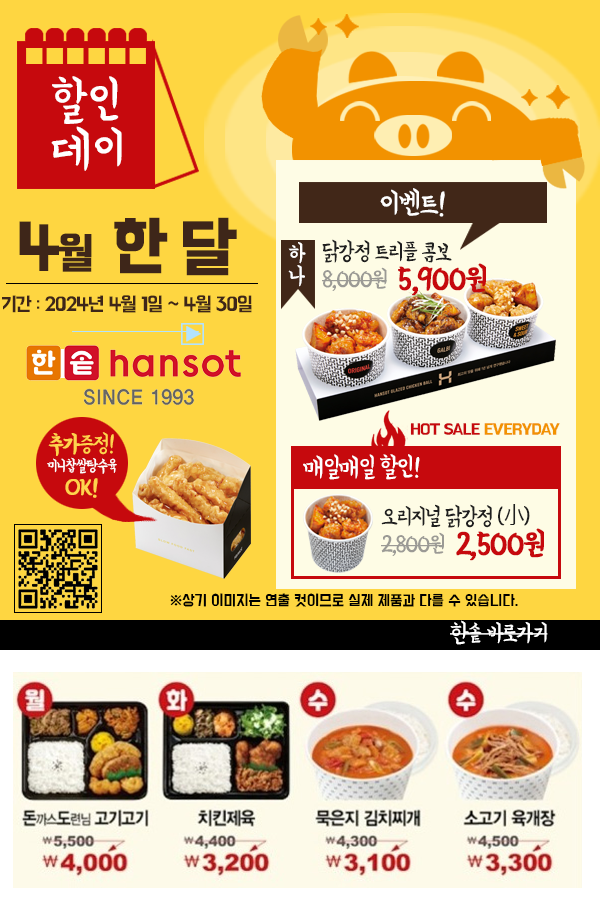
<style>
.page{position:relative;width:600px;height:900px;background:#fed641}
.page>*{position:absolute;margin:0}
.t1{font:49.5px "BMYEONSUNG";color:#ffffff}
.t2{font:49.5px/48.1px "BMYEONSUNG";color:#ffffff}
.t3{font:31.4px "BMYEONSUNG";letter-spacing:-0.06em;color:#ffffff}
.t4{font:20px/44px "BMHANNAPro";letter-spacing:-0.06em;color:#3e2619}
.t5{font:66px "BMHANNAPro";letter-spacing:-0.06em;color:#3e2619;font-weight:bold}
.t6{font:44px "BMHANNAPro";letter-spacing:-0.06em;color:#3e2619;font-weight:bold}
.t7{font:66px "BMHANNAPro";letter-spacing:-0.1em;color:#3e2619;font-weight:bold}
.t8{font:24px/22px "BMYEONSUNG";letter-spacing:-0.06em;color:#ffffff}
.t9{font:24px/22px "BMYEONSUNG";letter-spacing:-0.06em;color:#1f1f1f}
.t10{font:24px/28px "BMYEONSUNG";letter-spacing:-0.06em;color:#9b9a95}
.t11{font:32px/28px "BMYEONSUNG";letter-spacing:-0.06em;color:#c6090d;font-weight:bold}
.t12{font:16px "BMHANNAPro";letter-spacing:-0.06em;color:#c6090d}
.t13{font:16px "BMHANNAPro";letter-spacing:-0.06em;color:#f29200}
.t14{font:16px/20px "BMYEONSUNG";letter-spacing:-0.06em;color:#ffffff}
.t15{font:24px/26px "BMYEONSUNG";letter-spacing:-0.06em;color:#ffd34d;font-weight:bold}
.t16{font:24px/26px "BMYEONSUNG";letter-spacing:-0.06em;color:#ffd34d}
.t17{font:24px/24px "BMYEONSUNG";letter-spacing:-0.06em;color:#ffd34d;font-weight:bold}
.t18{font:26px "BMYEONSUNG";letter-spacing:-0.06em;color:#ffffff}
.t19{font:24px/22px "NanumGothic";letter-spacing:-0.06em;color:#1f1f1f}
.t20{font:13px "BMDoHyeon";color:#000000}
.t21{font:24px "BMYEONSUNG";letter-spacing:-0.06em;color:#ffffff}
</style>
<div class="page">
<p class="t1" style="left:51px;top:76px;width:71px;height:95px">할인<br><span class="t2">데이</span></p>
<p class="t3" style="left:380px;top:188px;width:65px;height:29px">이벤트!</p>
<p class="t4" style="left:2px;top:217px;width:250px;height:96px;text-align:center"><span class="t5">4</span><span class="t6">월 </span><span class="t7">한 달<br></span>기간 : 2024년 4월 1일 ~ 4월 30일</p>
<p class="t8" style="left:288px;top:242px;width:18px;height:45px">하나</p>
<p class="t9" style="left:322px;top:239px;width:164px;height:57px">닭강정 트리플 콤보<br><span class="t10">8,000원  </span><span class="t11">5,900원</span></p>
<p class="t12" style="left:410px;top:423px;width:150px;height:12px">HOT SALE <span class="t13">EVERYDAY</span></p>
<p class="t14" style="left:47px;top:432px;width:70px;height:66px;text-align:center"><span class="t15">추가</span><span class="t16">증정!<br></span>미니찹쌀탕수육<br><span class="t17">OK!</span></p>
<p class="t18" style="left:303px;top:454px;width:117px;height:26px">매일매일 할인!</p>
<p class="t9" style="left:381px;top:504px;width:163px;height:57px">오리지널 닭강정 (<span class="t19">小</span>)<br><span class="t10">2,800원  </span><span class="t11">2,500원</span></p>
<p class="t20" style="left:170px;top:593px;width:348px;height:14px">※상기 이미지는 연출 컷이므로 실제 제품과 다를 수 있습니다.</p>
<p class="t21" style="left:450px;top:620px;width:98px;height:25px">한솥 바로가기</p>
</div>
